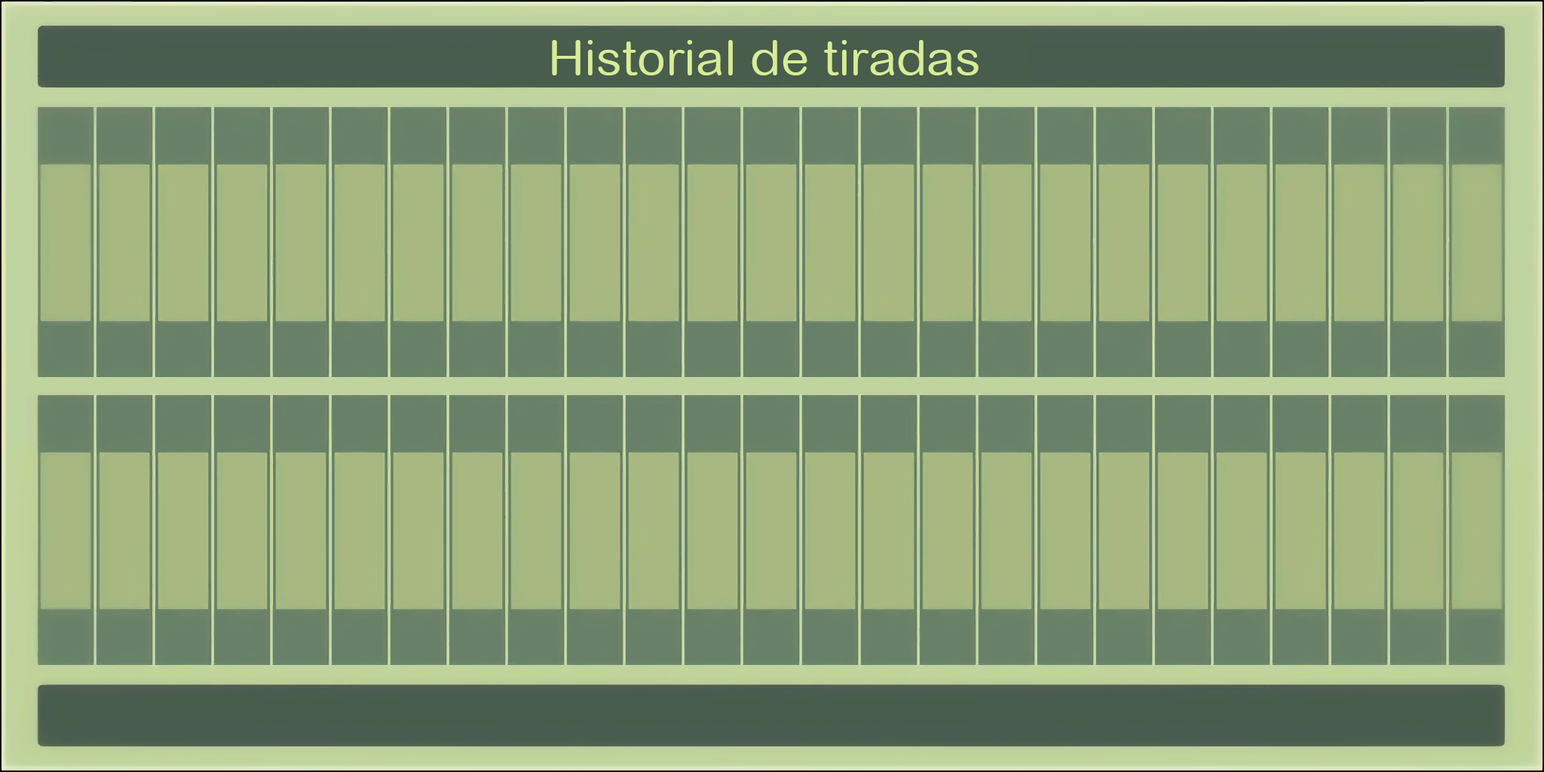
<style>
.page{position:relative;width:1544px;height:772px}
.page>*{position:absolute;margin:0}
.t1{font:49.6px "ArialRoundedMT";color:#d8ec98}
</style>
<div class="page">
<p class="t1" style="left:552px;top:40px;width:427px;height:35px">Historial de tiradas</p>
</div>
